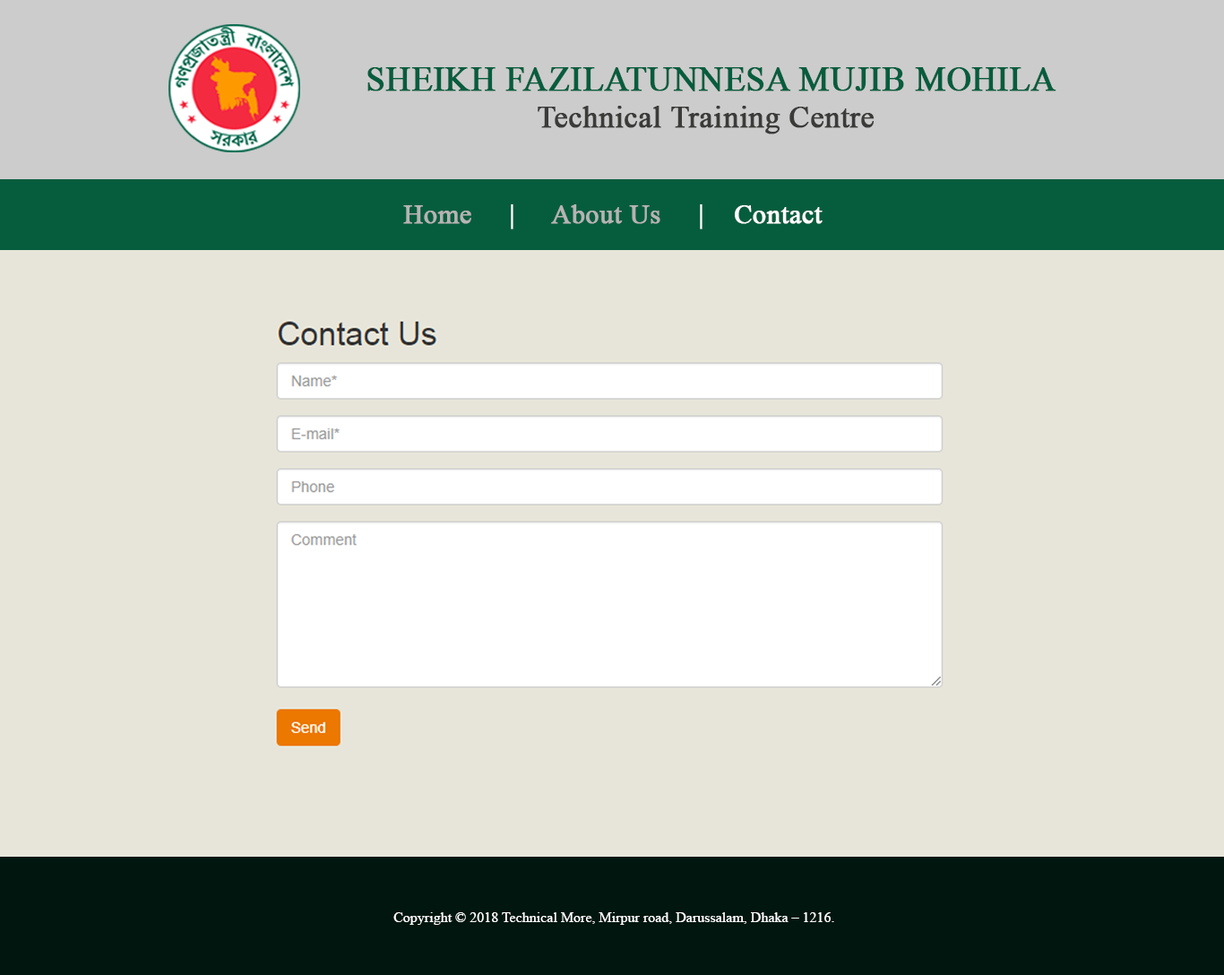
<style>
.page{position:relative;width:1224px;height:975px;background:#e7e5d9}
.page>*{position:absolute;margin:0}
.t1{font:34px "TimesNewRomanPSMT";color:#065d3e;text-transform:uppercase;font-weight:bold}
.t2{font:30.5px "TimesNewRomanPSMT";color:#3b3b3a;font-weight:bold}
.t3{font:26.9px "TimesNewRomanPSMT";color:#ffffff;font-weight:bold}
.t4{font:26.9px "TimesNewRomanPSMT";color:#b4b4b4;font-weight:bold}
.t5{font:14.3px "TimesNewRomanPSMT";color:#ffffff}
</style>
<div class="page">
<p class="t1" style="left:367px;top:67px;width:689px;height:67px;text-align:center">Sheikh Fazilatunnesa Mujib MOHILA<br><span class="t2">Technical Training Centre</span></p>
<p class="t3" style="left:403px;top:204px;width:419px;height:25px"><span class="t4">Home     </span>|     <span class="t4">About Us </span>    |    Contact</p>
<p class="t5" style="left:393px;top:912px;width:441px;height:12px">Copyright © 2018 Technical More, Mirpur road, Darussalam, Dhaka – 1216.</p>
</div>
